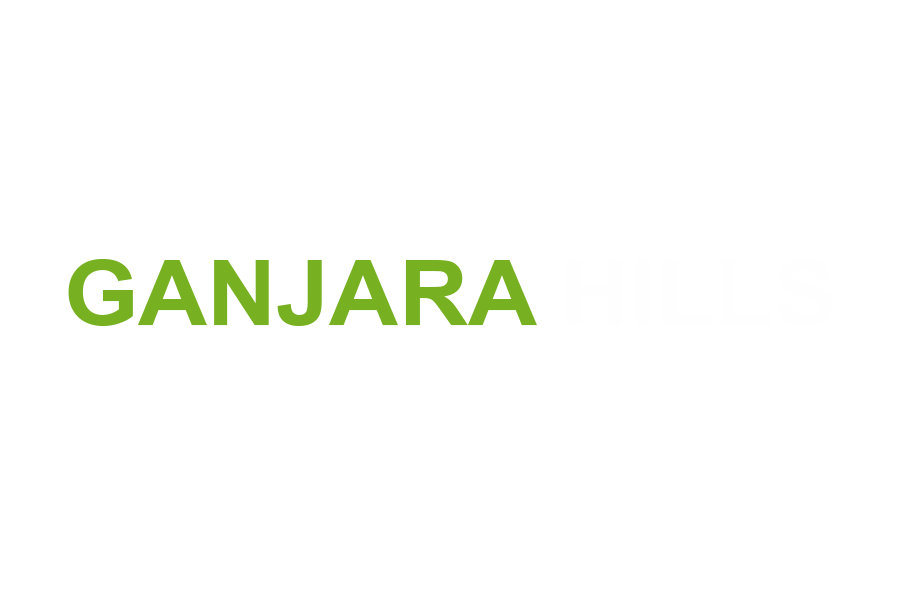
<style>
.page{position:relative;width:900px;height:600px;background:#ffffff}
.page>*{position:absolute;margin:0}
.t1{font:90.9px "ArialNarrow-Bold";color:#77b122;scale:1.28 1}
.t2{font:90.9px "ArialNarrow-Bold";color:#fefefe;scale:1.28 1}
</style>
<div class="page">
<p class="t1" style="left:68px;top:259px;width:765px;height:67px">GANJARA<span class="t2"> HILLS</span></p>
</div>
